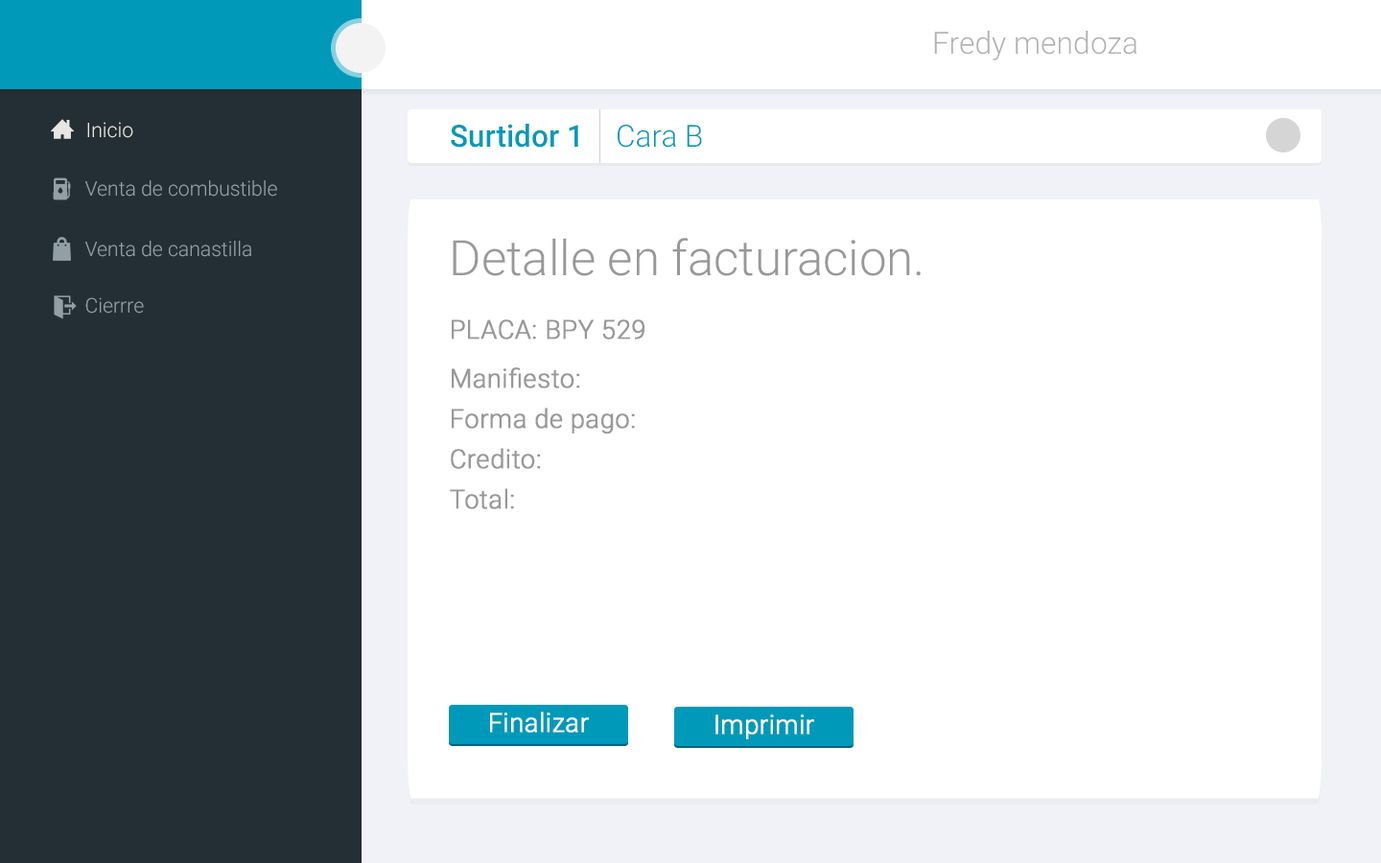
<style>
.page{position:relative;width:1381px;height:863px;background:#ffffff}
.page>*{position:absolute;margin:0}
.t1{font:30.7px "Roboto-Light";color:#b4b1b1}
.t2{font:20.3px "Roboto-Light";color:#e8e6e2}
.t3{font:30.7px "Roboto-Medium";color:#0099b9}
.t4{font:30.7px "Roboto-Light";color:#0099b9}
.t5{font:20.3px "Roboto-Light";color:#939fa7}
.t6{font:48.9px "Roboto-Light";color:#989898}
.t7{font:26.1px "Roboto-Light";color:#989898;font-weight:bold}
.t8{font:26.1px "Roboto-Light";color:#ffffff;font-weight:bold}
</style>
<div class="page">
<p class="t1" style="left:934px;top:31px;width:203px;height:29px">Fredy mendoza</p>
<p class="t2" style="left:87px;top:122px;width:46px;height:16px">Inicio</p>
<p class="t3" style="left:451px;top:124px;width:127px;height:24px">Surtidor 1</p>
<p class="t4" style="left:618px;top:125px;width:84px;height:23px">Cara B</p>
<p class="t5" style="left:85px;top:180px;width:192px;height:17px">Venta de combustible</p>
<p class="t5" style="left:85px;top:241px;width:166px;height:16px">Venta de canastilla</p>
<p class="t6" style="left:453px;top:238px;width:468px;height:38px">Detalle en facturacion.</p>
<p class="t5" style="left:85px;top:297px;width:59px;height:17px">Cierrre</p>
<p class="t7" style="left:452px;top:319px;width:193px;height:21px">PLACA: BPY 529</p>
<p class="t7" style="left:452px;top:367px;width:128px;height:21px">Manifiesto:</p>
<p class="t7" style="left:452px;top:408px;width:183px;height:27px">Forma de pago:</p>
<p class="t7" style="left:451px;top:448px;width:90px;height:21px">Credito:</p>
<p class="t7" style="left:450px;top:488px;width:64px;height:21px">Total:</p>
<p class="t8" style="left:490px;top:712px;width:99px;height:21px">Finalizar</p>
<p class="t8" style="left:716px;top:715px;width:98px;height:25px">Imprimir</p>
</div>
